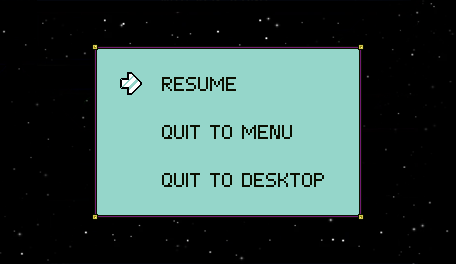
<style>
.page{position:relative;width:456px;height:264px;background:#000000}
.page>*{position:absolute;margin:0}
.t1{font:20px "[-XEN-]-Regular";color:#0b0f00}
</style>
<div class="page">
<p class="t1" style="left:162px;top:77px;width:162px;height:110px">RESUME<br><br>QUIT TO MENU<br><br>QUIT TO DESKTOP</p>
</div>
